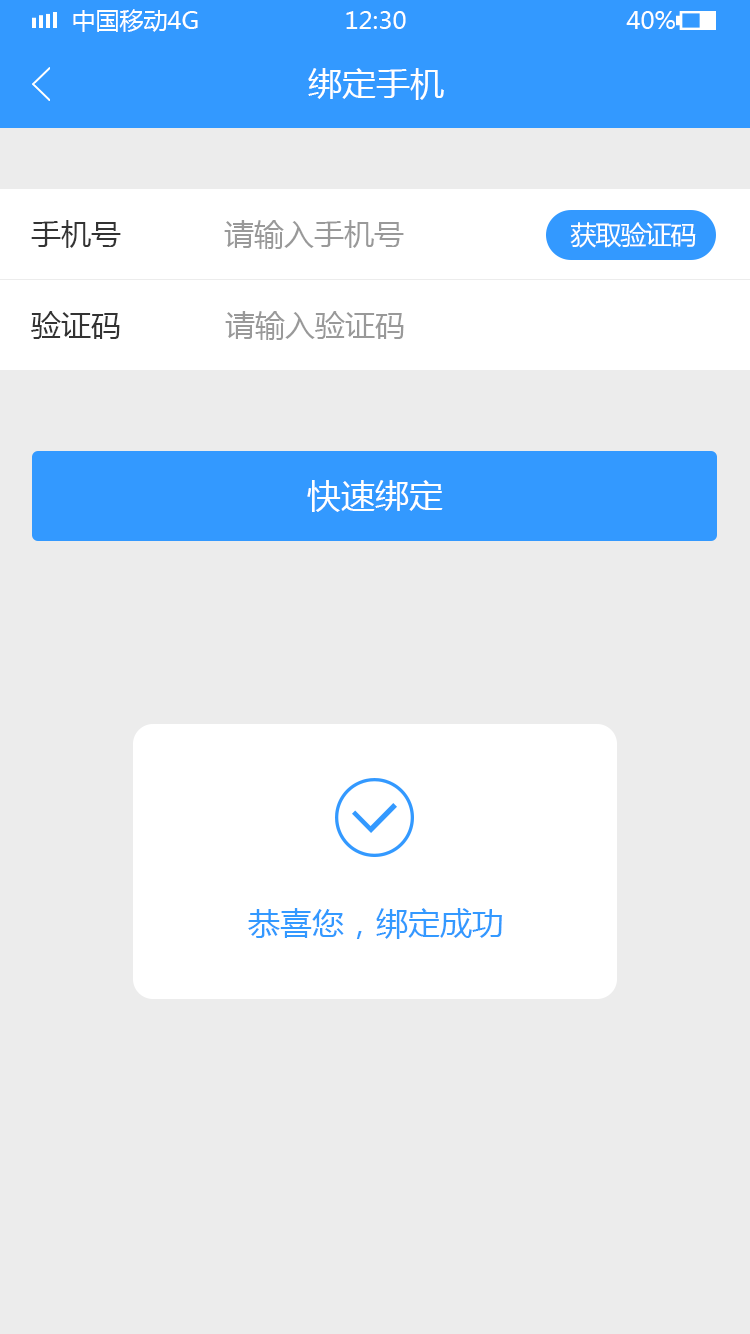
<style>
.page{position:relative;width:750px;height:1334px;background:#ececec}
.page>*{position:absolute;margin:0}
.t1{font:24px "MicrosoftYaHei";color:#ffffff;text-transform:uppercase}
.t2{font:34px "MicrosoftYaHei";color:#ffffff}
.t3{font:30px "MicrosoftYaHei";color:#333333}
.t4{font:30px "MicrosoftYaHei";color:#999999}
.t5{font:26px "MicrosoftYaHei";letter-spacing:-0.04em;color:#ffffff}
.t6{font:32px "MicrosoftYaHei";color:#3399ff}
</style>
<div class="page">
<p class="t1" style="left:73px;top:9px;width:125px;height:23px">中国移动4G</p>
<p class="t1" style="left:346px;top:11px;width:60px;height:18px">12:30</p>
<p class="t1" style="left:626px;top:11px;width:49px;height:18px">40%</p>
<p class="t2" style="left:308px;top:68px;width:136px;height:32px">绑定手机</p>
<p class="t3" style="left:31px;top:220px;width:90px;height:28px">手机号</p>
<p class="t4" style="left:224px;top:220px;width:180px;height:29px">请输入手机号</p>
<p class="t5" style="left:570px;top:222px;width:126px;height:26px">获取验证码</p>
<p class="t3" style="left:31px;top:311px;width:89px;height:28px">验证码</p>
<p class="t4" style="left:225px;top:311px;width:179px;height:29px">请输入验证码</p>
<p class="t2" style="left:307px;top:480px;width:136px;height:32px">快速绑定</p>
<p class="t6" style="left:248px;top:908px;width:254px;height:31px">恭喜您，绑定成功</p>
</div>
